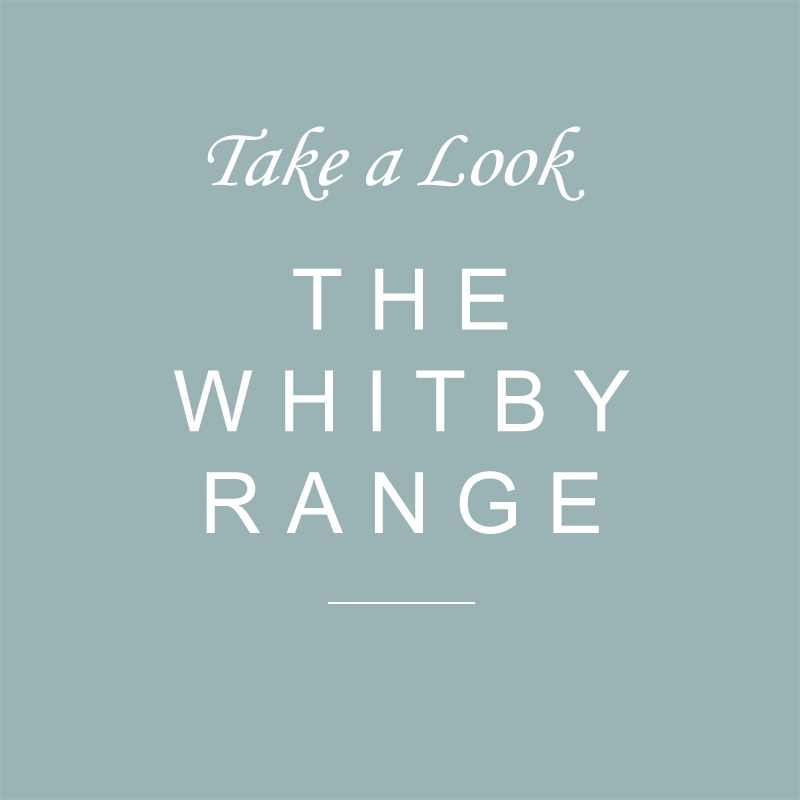
<style>
.page{position:relative;width:800px;height:800px;background:#9ab4b5}
.page>*{position:absolute;margin:0}
.t1{font:84.8px "MonotypeCorsiva";color:#ffffff;font-style:italic}
.t2{font:84.8px "ArialMT";letter-spacing:0.3em;color:#ffffff}
</style>
<div class="page">
<p class="t1" style="left:207px;top:126px;width:378px;height:75px">Take a Look</p>
<p class="t2" style="left:174px;top:268px;width:456px;height:266px;text-align:center">THE<br>WHITBY<br>RANGE</p>
</div>
